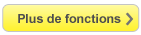
<style>
.page{position:relative;width:141px;height:35px;background:#ffffff}
.page>*{position:absolute;margin:0}
.t1{font:12.5px "Arial-BoldMT";color:#4d4d4f}
</style>
<div class="page">
<p class="t1" style="left:18px;top:14px;width:103px;height:9px">Plus de fonctions</p>
</div>
